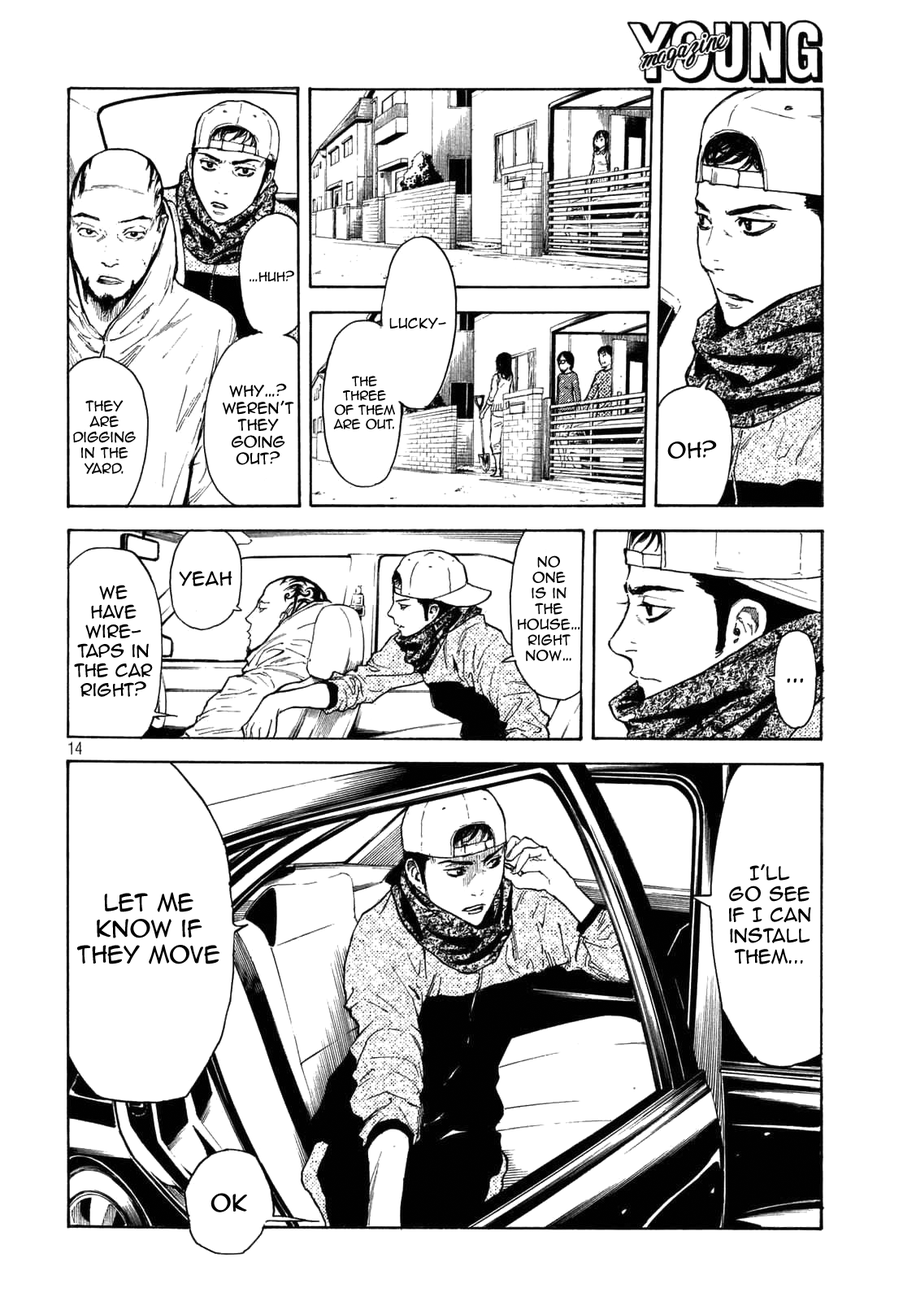
<style>
.page{position:relative;width:916px;height:1301px;background:#ffffff}
.page>*{position:absolute;margin:0}
.t1{font:11.9px "AnimeAce2.0BB";color:#000000}
.t2{font:13px "AnimeAce2.0BB";color:#000000}
.t3{font:14.1px "AnimeAce2.0BB";color:#000000}
.t4{font:19.5px "AnimeAce2.0BB";color:#000000}
.t5{font:17.4px "AnimeAce2.0BB";color:#000000}
.t6{font:16.3px "AnimeAce2.0BB";color:#000000}
.t7{font:21.7px "AnimeAce2.0BB";color:#000000}
</style>
<div class="page">
<p class="t1" style="left:250px;top:270px;width:44px;height:12px">…Huh?</p>
<p class="t2" style="left:390px;top:317px;width:56px;height:12px">Lucky-</p>
<p class="t1" style="left:333px;top:376px;width:62px;height:53px;text-align:center">The three <br>of them are out.</p>
<p class="t3" style="left:222px;top:383px;width:72px;height:82px;text-align:center">Why…? Weren’t they going out?</p>
<p class="t2" style="left:73px;top:400px;width:63px;height:74px;text-align:center">They are digging in the yard.</p>
<p class="t4" style="left:668px;top:440px;width:49px;height:19px">Oh?</p>
<p class="t2" style="left:518px;top:555px;width:63px;height:107px;text-align:center">No <br>one <br>is in <br>the house… right now…</p>
<p class="t5" style="left:179px;top:571px;width:54px;height:15px">Yeah</p>
<p class="t6" style="left:74px;top:585px;width:79px;height:112px;text-align:center">We <br>have wire-<br>taps in the car right?</p>
<p class="t7" style="left:787px;top:678px;width:17px;height:5px">...</p>
<p class="t5" style="left:729px;top:864px;width:83px;height:100px;text-align:center">I'll <br>go see if I can install them...</p>
<p class="t7" style="left:77px;top:892px;width:143px;height:72px;text-align:center">Let me know if they move</p>
<p class="t7" style="left:211px;top:1193px;width:36px;height:19px">Ok</p>
</div>
